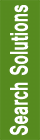
<style>
.page{position:relative;width:40px;height:140px;background:#568a1f}
.page>*{position:absolute;margin:0}
.t1{font:27.4px "Vrinda-Bold";color:#ffffff;scale:0.66 1}
</style>
<div class="page">
<p class="t1" style="left:9px;top:5px;width:20px;height:131px;rotate:-90deg">Search Solutions</p>
</div>
